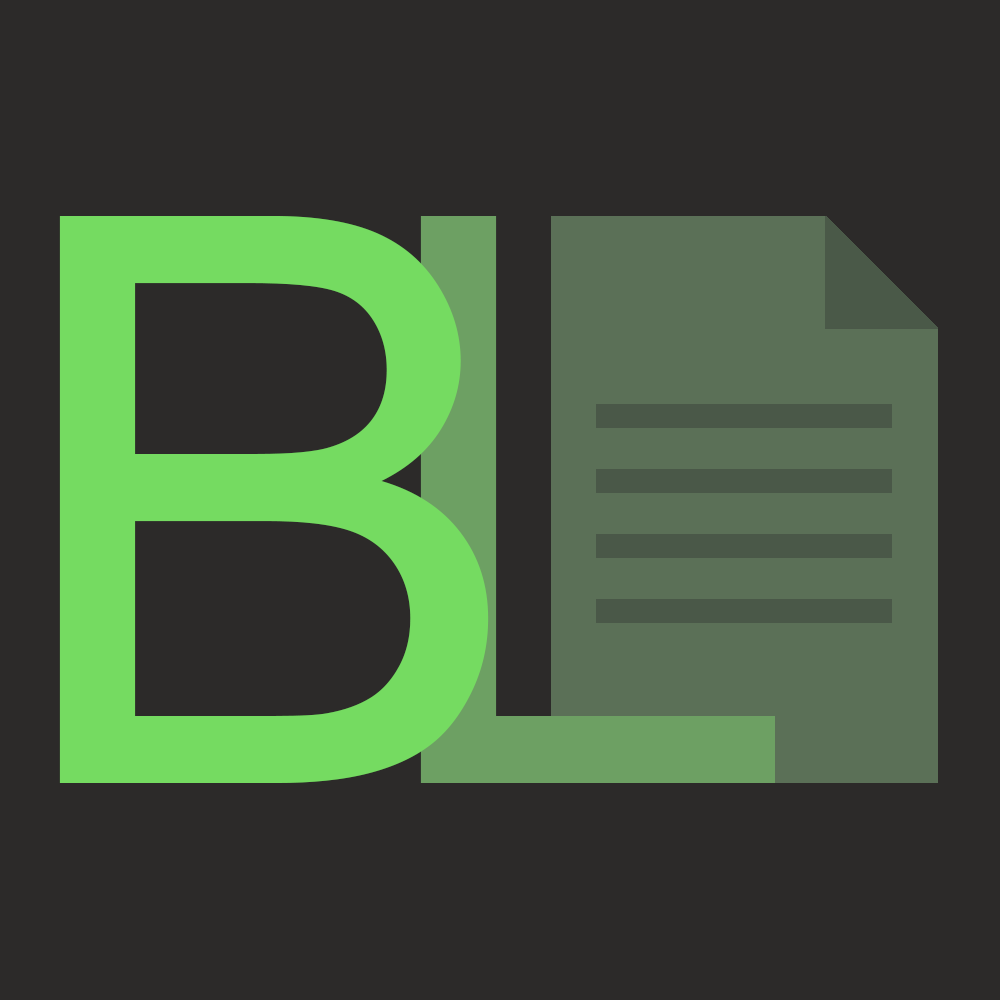
<style>
.page{position:relative;width:1000px;height:1000px;background:#2c2a29}
.page>*{position:absolute;margin:0}
.t1{font:791.7px "ArialMT";color:#75db61}
.t2{font:791.7px "ArialMT";color:#6da063}
</style>
<div class="page">
<p class="t1" style="left:59px;top:216px;width:430px;height:567px">B</p>
<p class="t2" style="left:420px;top:216px;width:355px;height:567px">L</p>
</div>
